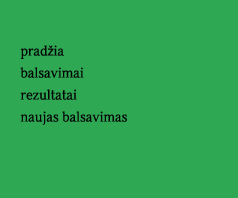
<style>
.page{position:relative;width:238px;height:198px;background:#2ea853}
.page>*{position:absolute;margin:0}
.t1{font:14px/22px "Tarminis-Normal";color:#050505}
.t2{font:14px/22px "MyriadPro-Regular";color:#050505}
</style>
<div class="page">
<p class="t1" style="left:20px;top:45px;width:107px;height:80px">prad<span class="t2">ž</span>ia<br>balsavimai<br>rezultatai<br>naujas balsavimas</p>
</div>
